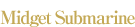
<style>
.page{position:relative;width:135px;height:27px;background:#ffffff}
.page>*{position:absolute;margin:0}
.t1{font:18px "RyuminPro-ExBold";letter-spacing:-0.08em;color:#c4a956}
</style>
<div class="page">
<p class="t1" style="left:0px;top:10px;width:135px;height:17px">Midget Submarine</p>
</div>
